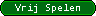
<style>
.page{position:relative;width:96px;height:16px;background:#006b11}
.page>*{position:absolute;margin:0}
.t1{font:10px "DroidSansMono";color:#ffffff}
</style>
<div class="page">
<p class="t1" style="left:15px;top:4px;width:65px;height:9px">Vrij Spelen</p>
</div>
